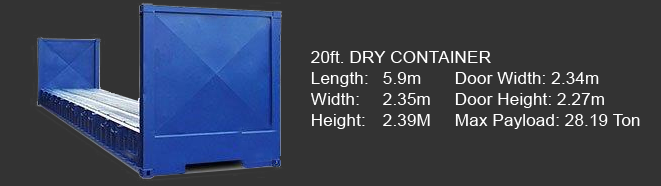
<style>
.page{position:relative;width:661px;height:186px;background:#333333}
.page>*{position:absolute;margin:0}
.t1{font:17.4px "ArialMT";color:#ffffff}
</style>
<div class="page">
<p class="t1" style="left:311px;top:51px;width:329px;height:78px">20ft. DRY CONTAINER<br>Length: 5.9m Door Width: 2.34m<br>Width: 2.35m Door Height: 2.27m<br>Height: 2.39M Max Payload: 28.19 Ton</p>
</div>
